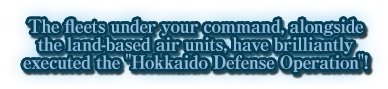
<style>
.page{position:relative;width:388px;height:89px}
.page>*{position:absolute;margin:0}
.t1{font:18px/18px "RyuminPro-ExBold";letter-spacing:-0.04em;color:#93bee0}
</style>
<div class="page">
<p class="t1" style="left:23px;top:19px;width:345px;height:53px;text-align:center">The fleets under your command, alongside<br>the land-based air units, have brilliantly<br>executed the "Hokkaido Defense Operation"!</p>
</div>
